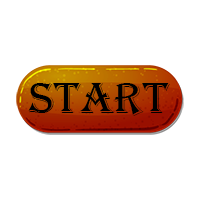
<style>
.page{position:relative;width:200px;height:200px;background:#ffffff}
.page>*{position:absolute;margin:0}
.t1{font:45px "Algerian";color:#000000}
</style>
<div class="page">
<p class="t1" style="left:28px;top:83px;width:142px;height:33px">Start</p>
</div>
